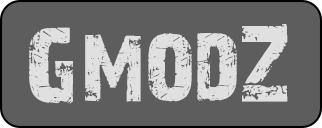
<style>
.page{position:relative;width:322px;height:128px;background:#5d5d5d}
.page>*{position:absolute;margin:0}
.t1{font:100px "28DaysLater";color:#e0e0e0}
</style>
<div class="page">
<p class="t1" style="left:29px;top:24px;width:259px;height:80px">GmodZ</p>
</div>
